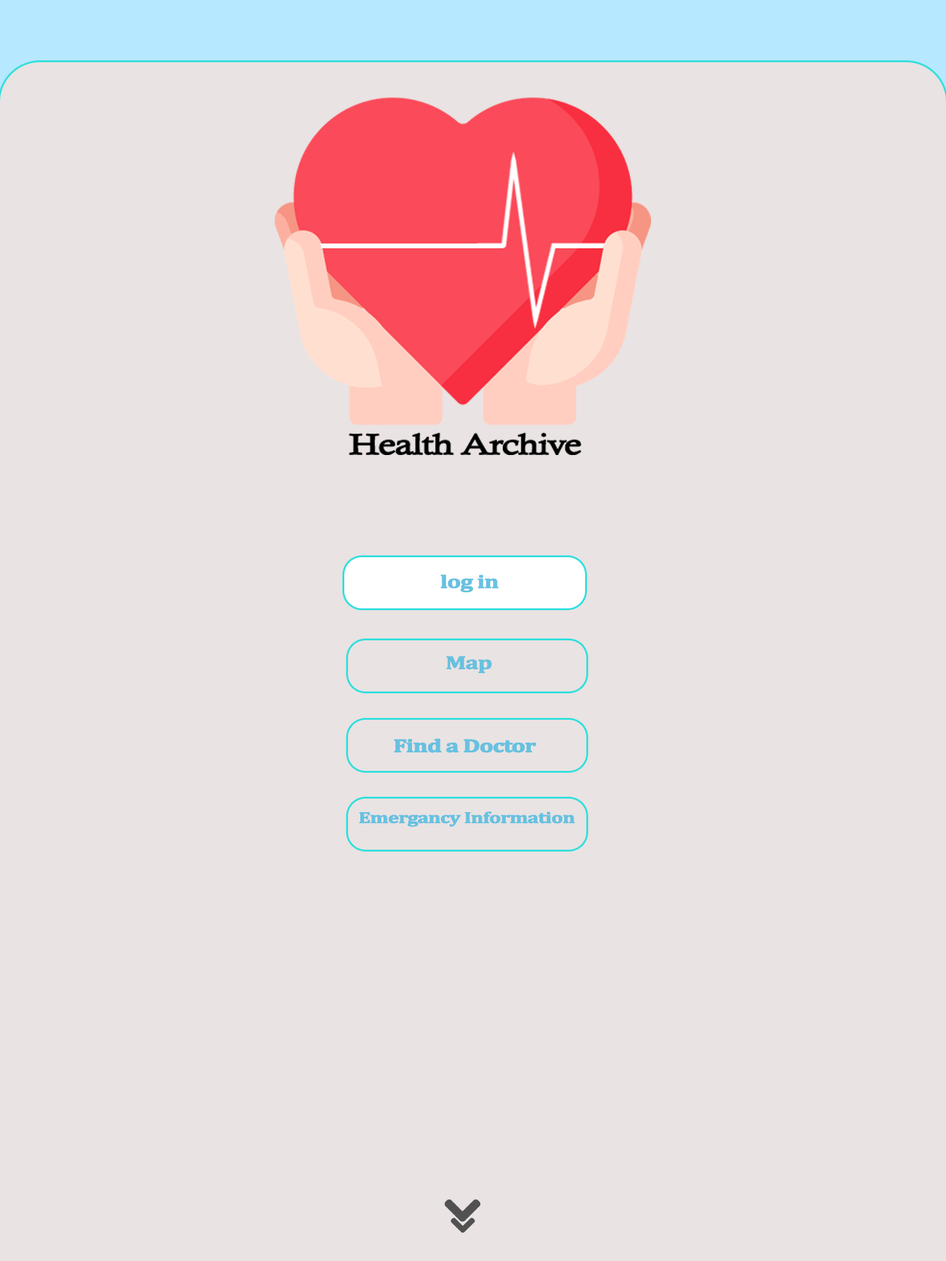
<style>
.page{position:relative;width:946px;height:1261px;background:#e9e3e3}
.page>*{position:absolute;margin:0}
.t1{font:18.5px "Cambria-Bold";letter-spacing:-0.05em;color:#68c1e0;font-weight:bold;scale:1.31 1}
.t2{font:15.8px "Cambria-Bold";letter-spacing:-0.05em;color:#68c1e0;font-weight:bold;scale:1.31 1}
</style>
<div class="page">
<p class="t1" style="left:440px;top:574px;width:59px;height:18px">log in</p>
<p class="t1" style="left:446px;top:656px;width:46px;height:18px">Map</p>
<p class="t1" style="left:394px;top:738px;width:142px;height:15px">Find a Doctor</p>
<p class="t1" style="left:394px;top:738px;width:142px;height:15px">Find a Doctor</p>
<p class="t2" style="left:359px;top:811px;width:216px;height:16px">Emergancy Information</p>
</div>
